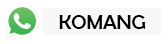
<style>
.page{position:relative;width:168px;height:44px;background:#ffffff}
.page>*{position:absolute;margin:0}
.t1{font:30px "BerlinSansFB-Reg";letter-spacing:-0.005em;color:#000000;font-variant:small-caps}
</style>
<div class="page">
<p class="t1" style="left:59px;top:15px;width:87px;height:14px">komang</p>
</div>
